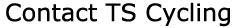
<style>
.page{position:relative;width:234px;height:28px;background:#ffffff}
.page>*{position:absolute;margin:0}
.t1{font:24px "Verdana";color:#030201}
</style>
<div class="page">
<p class="t1" style="left:6px;top:2px;width:224px;height:25px">Contact TS Cycling</p>
</div>
